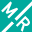
<style>
.page{position:relative;width:32px;height:32px;background:#00a99d}
.page>*{position:absolute;margin:0}
.t1{font:18px "DINAlternate-Bold";color:#ffffff}
</style>
<div class="page">
<p class="t1" style="left:1px;top:1px;width:17px;height:18px;rotate:45deg">M</p>
<p class="t1" style="left:16px;top:16px;width:14px;height:16px;rotate:45deg">R</p>
</div>
